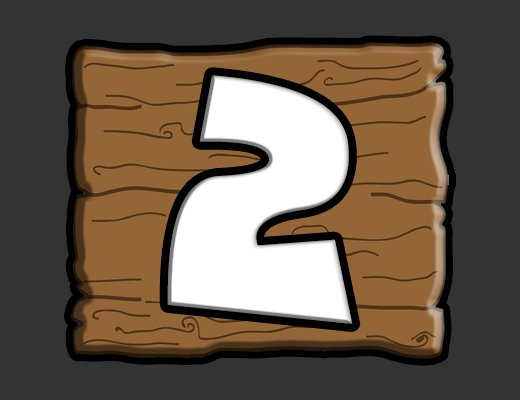
<style>
.page{position:relative;width:520px;height:400px;background:#333333}
.page>*{position:absolute;margin:0}
.t1{font:300px "Funhouse";color:#ffffff}
</style>
<div class="page">
<p class="t1" style="left:167px;top:75px;width:186px;height:249px">2</p>
</div>
